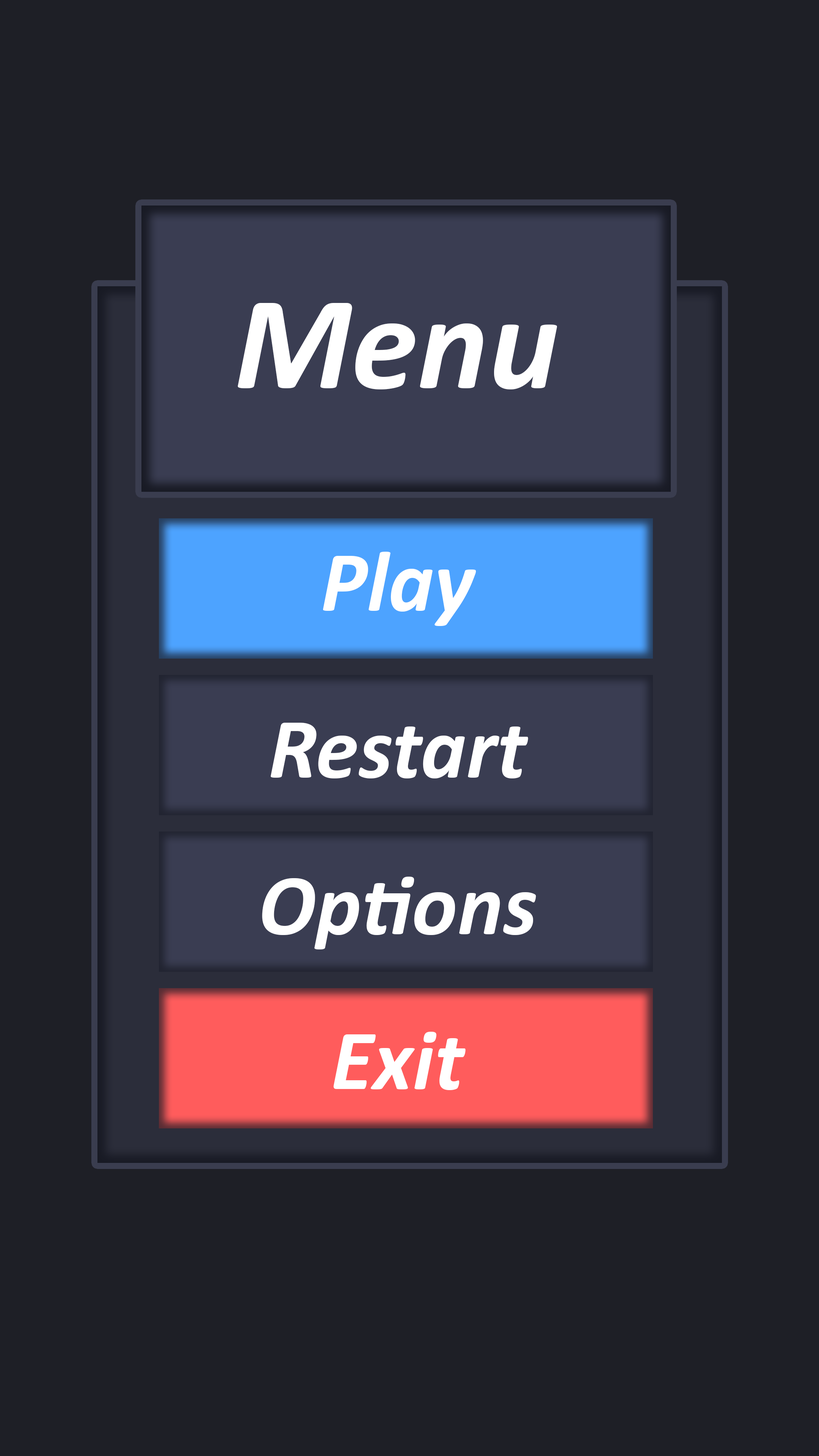
<style>
.page{position:relative;width:819px;height:1456px;background:#1e1f26}
.page>*{position:absolute;margin:0}
.t1{font:134.3px "Calibri-BoldItalic";color:#ffffff}
.t2{font:86.5px "Calibri-BoldItalic";color:#ffffff}
</style>
<div class="page">
<p class="t1" style="left:238px;top:303px;width:319px;height:86px">Menu</p>
<p class="t2" style="left:323px;top:552px;width:153px;height:74px">Play</p>
<p class="t2" style="left:271px;top:723px;width:257px;height:55px">Restart</p>
<p class="t2" style="left:262px;top:877px;width:274px;height:72px">Options</p>
<p class="t2" style="left:333px;top:1032px;width:133px;height:58px">Exit</p>
</div>
